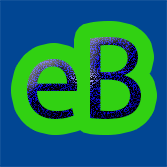
<style>
.page{position:relative;width:167px;height:167px;background:#014693}
.page>*{position:absolute;margin:0}
.t1{font:119px "MyriadPro-Regular"}
</style>
<div class="page">
<p class="t1" style="left:27px;top:37px;width:114px;height:82px">eB</p>
</div>
